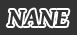
<style>
.page{position:relative;width:77px;height:35px;background:#333333}
.page>*{position:absolute;margin:0}
.t1{font:25.5px "GentiumBookPlus-BoldItalic";color:#333333}
</style>
<div class="page">
<p class="t1" style="left:7px;top:9px;width:62px;height:18px">NANE</p>
</div>
